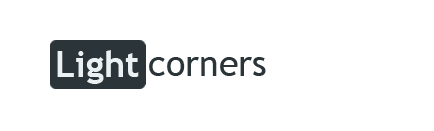
<style>
.page{position:relative;width:434px;height:131px;background:#ffffff}
.page>*{position:absolute;margin:0}
.t1{font:36px "TrebuchetMS-Bold";color:#ebf0f2}
.t2{font:36px "TrebuchetMS";color:#2b3438}
</style>
<div class="page">
<p class="t1" style="left:57px;top:50px;width:82px;height:34px">Light</p>
<p class="t2" style="left:149px;top:57px;width:117px;height:19px">corners</p>
</div>
